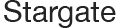
<style>
.page{position:relative;width:120px;height:28px;background:#ffffff}
.page>*{position:absolute;margin:0}
.t1{font:30px "HelveticaNeue";color:#242424}
</style>
<div class="page">
<p class="t1" style="left:4px;top:0px;width:112px;height:28px">Stargate</p>
</div>
